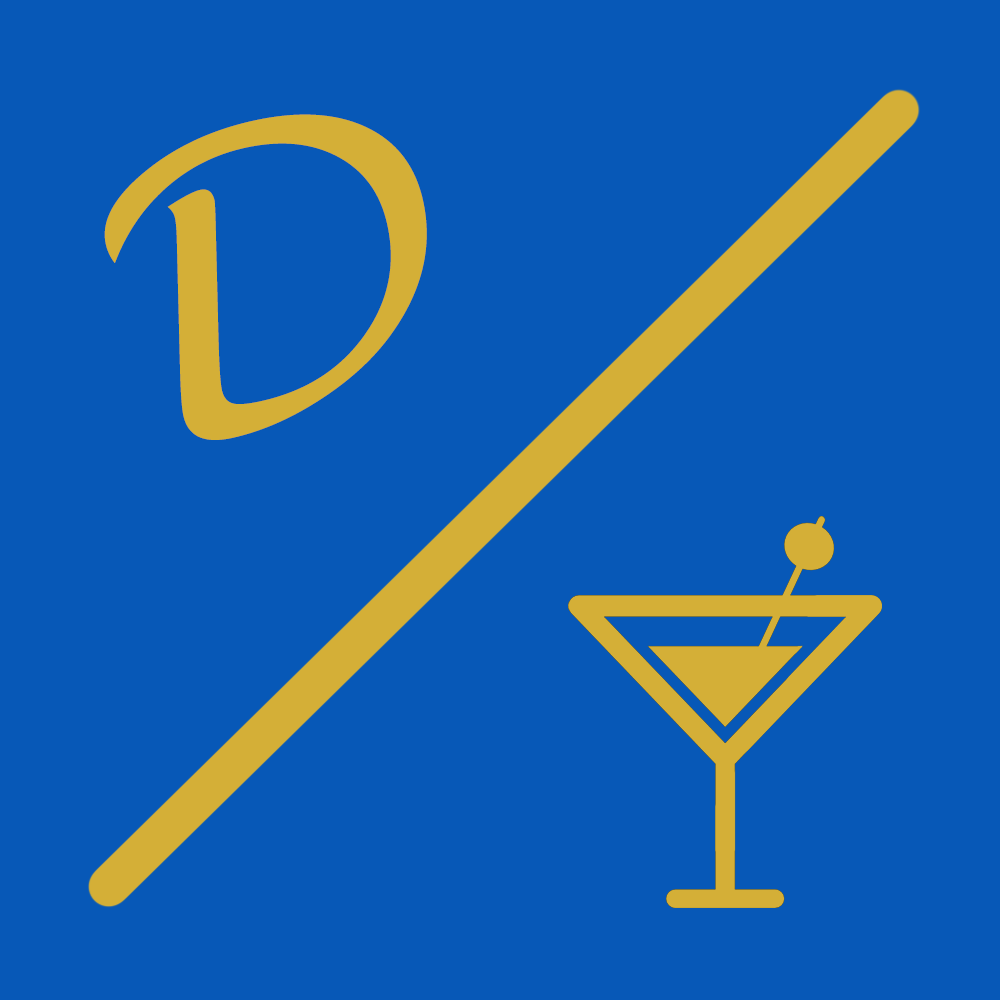
<style>
.page{position:relative;width:1000px;height:1000px;background:#0758b7}
.page>*{position:absolute;margin:0}
.t1{font:387.5px "LucidaHandwriting-Italic";color:#d4af37}
</style>
<div class="page">
<p class="t1" style="left:104px;top:114px;width:323px;height:326px;rotate:-13deg">D</p>
</div>
